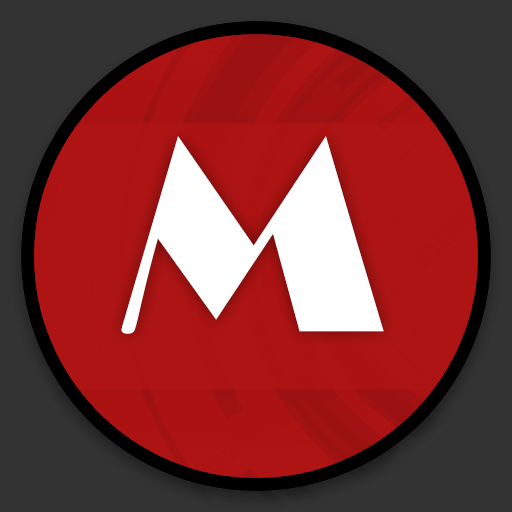
<style>
.page{position:relative;width:512px;height:512px;background:#333333}
.page>*{position:absolute;margin:0}
.t1{font:282.2px "Broadway";color:#ffffff}
</style>
<div class="page">
<p class="t1" style="left:121px;top:136px;width:263px;height:198px">M</p>
</div>
